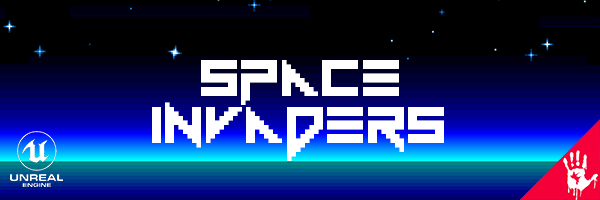
<style>
.page{position:relative;width:600px;height:200px;background:#000000}
.page>*{position:absolute;margin:0}
.t1{font:72px "Vermin-Vibes-1989";color:#ffffff}
</style>
<div class="page">
<p class="t1" style="left:201px;top:60px;width:198px;height:45px">Space</p>
<p class="t1" style="left:152px;top:102px;width:292px;height:59px">Invaders</p>
</div>
